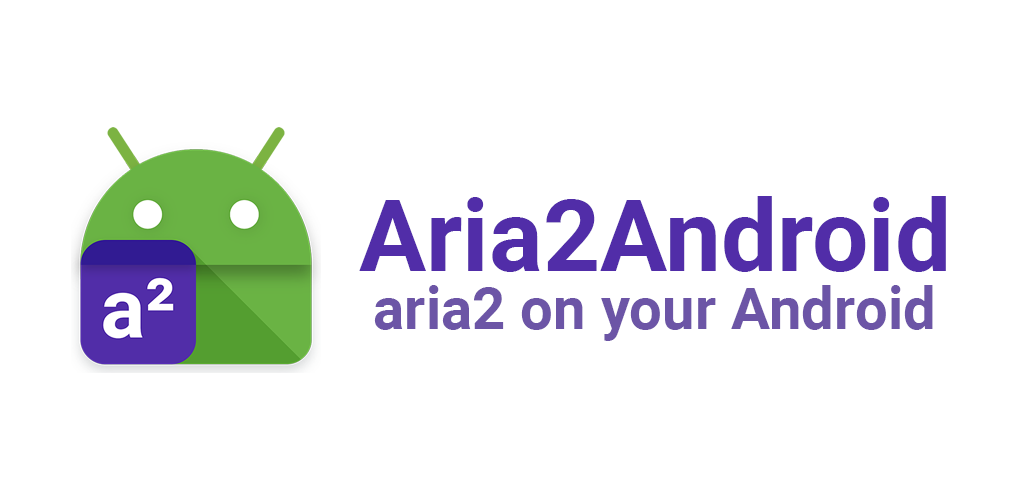
<style>
.page{position:relative;width:1024px;height:500px;background:#ffffff}
.page>*{position:absolute;margin:0}
.t1{font:100px "Roboto-Bold";color:#512da8}
.t2{font:58.3px "Roboto-Bold";color:#6c55a6}
</style>
<div class="page">
<p class="t1" style="left:359px;top:196px;width:587px;height:76px">Aria2Android</p>
<p class="t2" style="left:374px;top:285px;width:559px;height:56px">aria2 on your Android</p>
</div>
